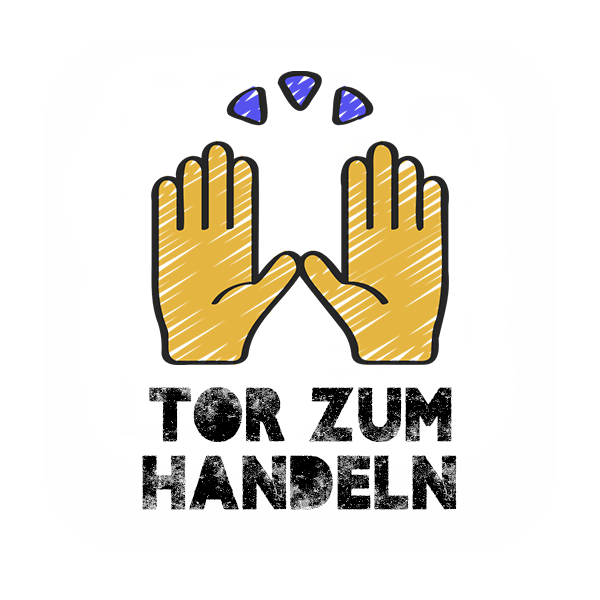
<style>
.page{position:relative;width:600px;height:600px;background:#ffffff}
.page>*{position:absolute;margin:0}
.t1{font:80px "UNDERWAYPERSONALUSE-Bold";color:#000000}
</style>
<div class="page">
<p class="t1" style="left:149px;top:387px;width:303px;height:55px">TOR ZUM</p>
<p class="t1" style="left:142px;top:455px;width:315px;height:55px">HANDELN</p>
</div>
